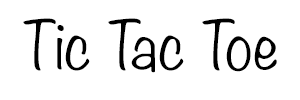
<style>
.page{position:relative;width:300px;height:100px;background:#ffffff}
.page>*{position:absolute;margin:0}
.t1{font:60px "Noteworthy-Light";color:#000000}
</style>
<div class="page">
<p class="t1" style="left:23px;top:18px;width:254px;height:55px">Tic Tac Toe</p>
</div>
